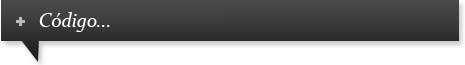
<style>
.page{position:relative;width:465px;height:65px;background:#ffffff}
.page>*{position:absolute;margin:0}
.t1{font:20px "Constantia-Italic";letter-spacing:-0.01em;color:#ffffff}
</style>
<div class="page">
<p class="t1" style="left:39px;top:12px;width:71px;height:20px">Código...</p>
</div>
